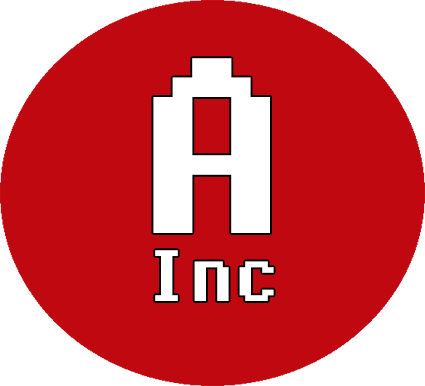
<style>
.page{position:relative;width:425px;height:386px;background:#c00811}
.page>*{position:absolute;margin:0}
.t1{font:248.7px "Fixedsys";color:#ffffff}
.t2{font:72px "Fixedsys";color:#ffffff}
</style>
<div class="page">
<p class="t1" style="left:153px;top:58px;width:117px;height:175px">A</p>
<p class="t2" style="left:155px;top:250px;width:119px;height:51px">Inc</p>
</div>
